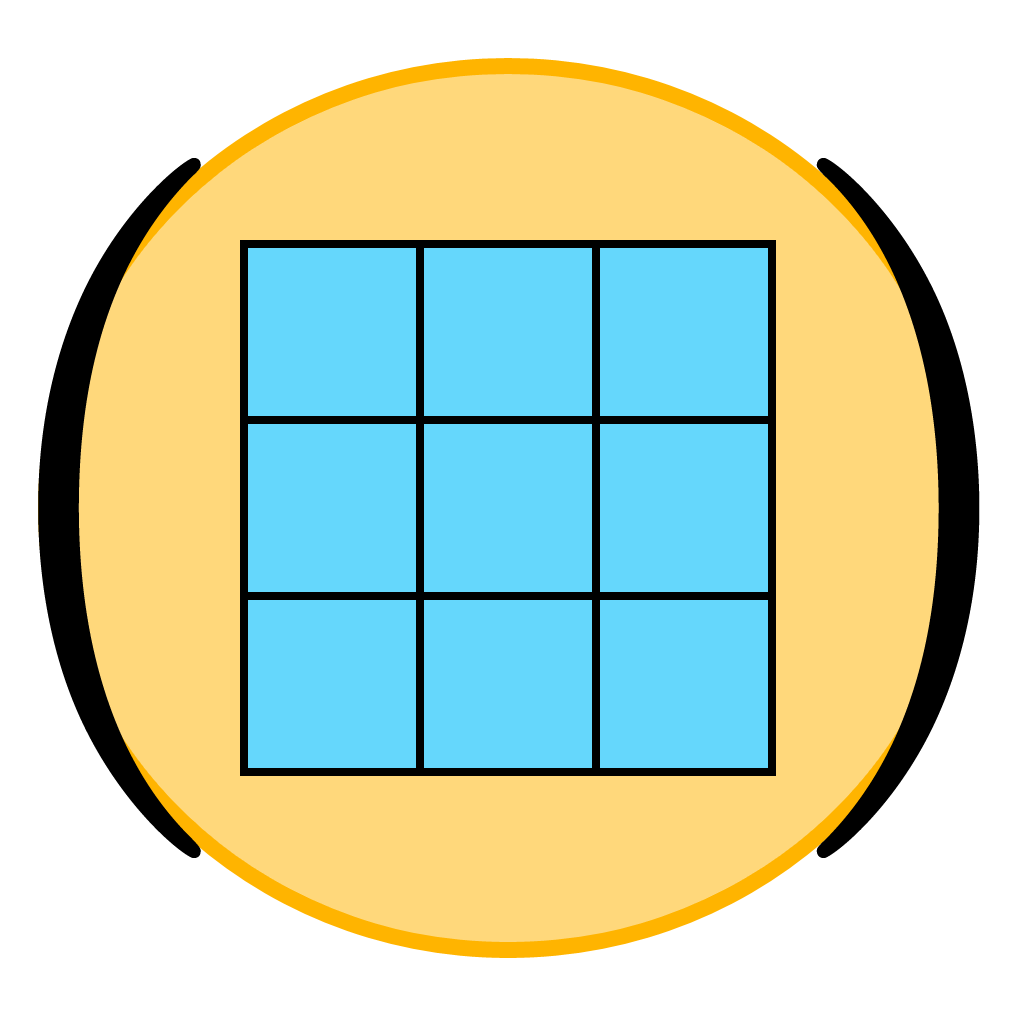
<style>
.page{position:relative;width:1024px;height:1024px;background:#ffffff}
.page>*{position:absolute;margin:0}
.t1{font:700px "LMRoman10-Regular";color:#000000}
</style>
<div class="page">
<p class="t1" style="left:38px;top:158px;width:942px;height:700px">(   )</p>
</div>
